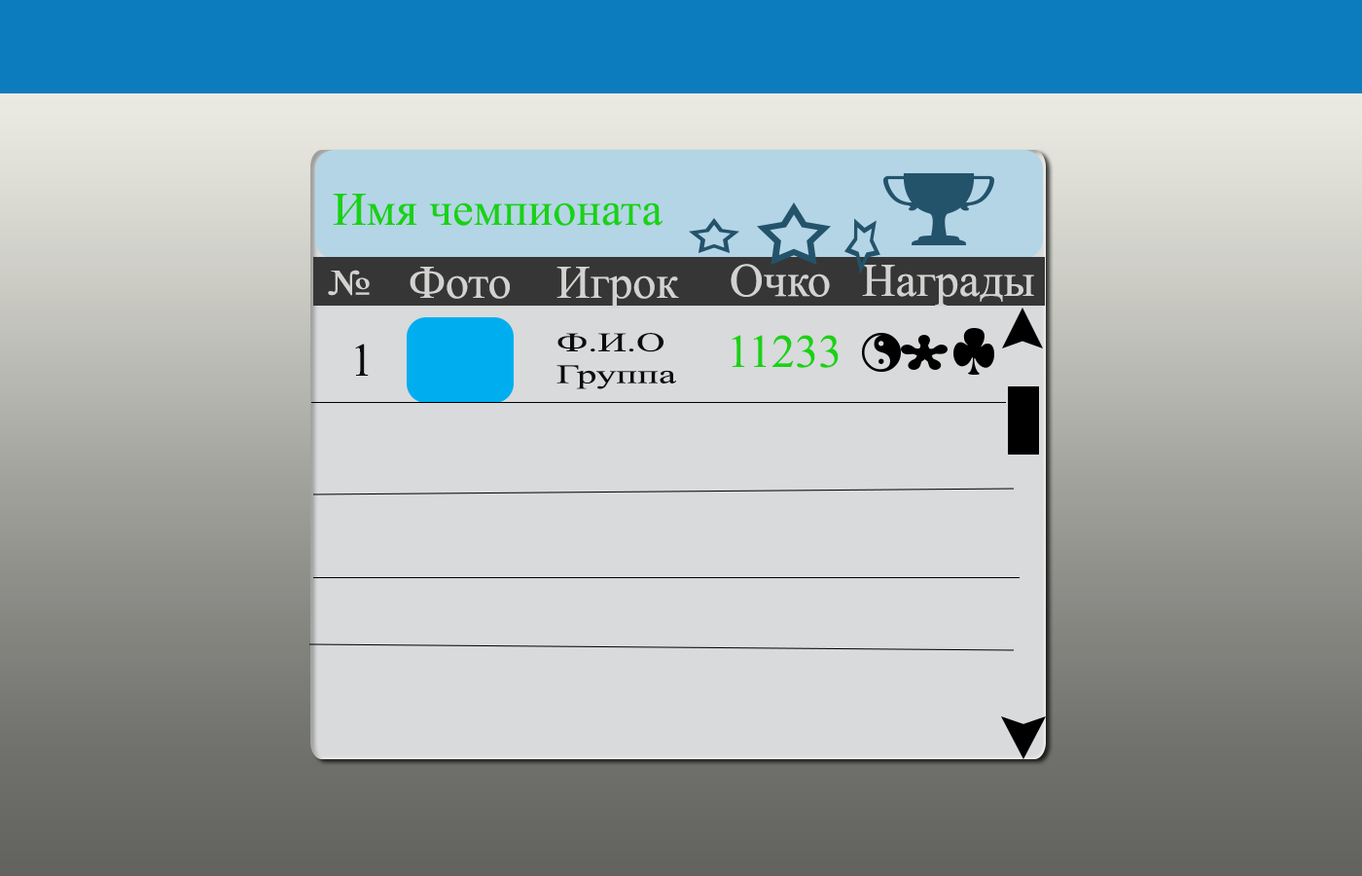
<style>
.page{position:relative;width:1362px;height:876px;background:#d8dadb}
.page>*{position:absolute;margin:0}
.t1{font:46.7px "TimesNewRomanPSMT";color:#1ad115}
.t2{font:35.9px "TimesNewRomanPSMT";color:#d2d2d1;scale:1.25 1}
.t3{font:46.7px "TimesNewRomanPSMT";color:#d2d2d1}
.t4{font:47px "TimesNewRomanPSMT";color:#d2d2d1}
.t5{font:26.6px "TimesNewRomanPSMT";color:#0c0c0c;scale:1.49 1}
.t6{font:46.7px "TimesNewRomanPSMT";color:#0c0c0c}
</style>
<div class="page">
<p class="t1" style="left:333px;top:194px;width:329px;height:32px">Имя чемпионата</p>
<p class="t2" style="left:328px;top:269px;width:42px;height:27px">№</p>
<p class="t3" style="left:410px;top:267px;width:100px;height:32px">Фото</p>
<p class="t3" style="left:556px;top:267px;width:123px;height:41px">Игрок</p>
<p class="t4" style="left:731px;top:264px;width:99px;height:33px">Очко</p>
<p class="t3" style="left:862px;top:265px;width:172px;height:41px">Награды</p>
<p class="t5" style="left:556px;top:333px;width:120px;height:56px;text-align:right">Ф.И.О<br>Группа</p>
<p class="t1" style="left:732px;top:335px;width:107px;height:33px">11233</p>
<p class="t6" style="left:355px;top:343px;width:14px;height:33px">1</p>
</div>
